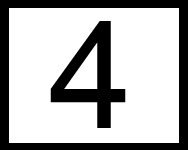
<style>
.page{position:relative;width:188px;height:150px;background:#ffffff}
.page>*{position:absolute;margin:0}
.t1{font:150px "ArialMT";color:#000000}
</style>
<div class="page">
<p class="t1" style="left:50px;top:21px;width:76px;height:107px">4</p>
</div>
